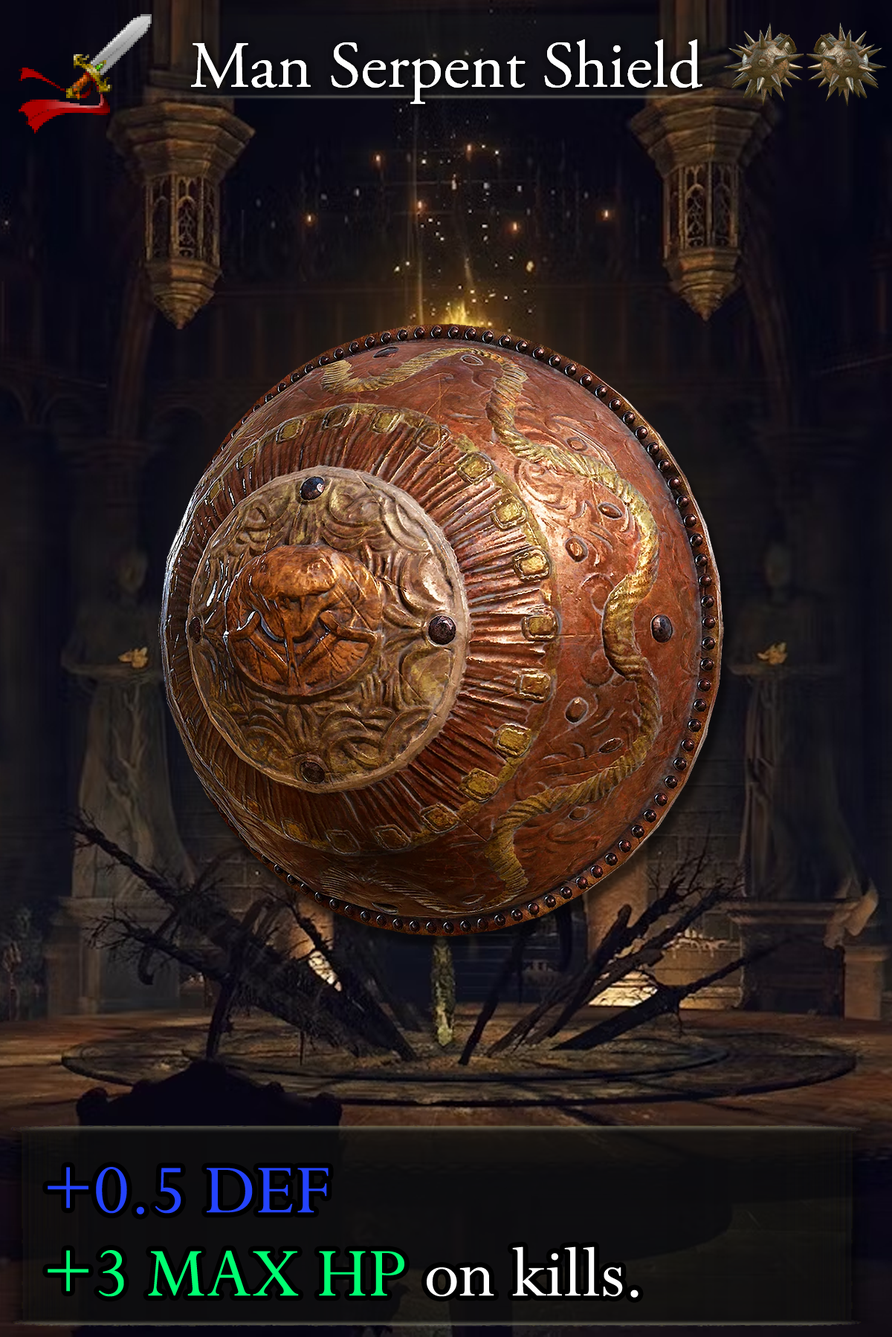
<style>
.page{position:relative;width:892px;height:1337px}
.page>*{position:absolute;margin:0}
.t1{font:132.3px/83.2px "Perpetua";color:#00ff72}
.t2{font:132.3px/83.2px "Perpetua";color:#2443ff}
.t3{font:132.3px/83.2px "Perpetua";color:#ffffff}
</style>
<div class="page">
<p class="t1" style="left:48px;top:1167px;width:590px;height:131px"><span class="t2">+0.5 DEF<br></span>+3 MAX HP<span class="t3"> on kills.</span></p>
</div>
